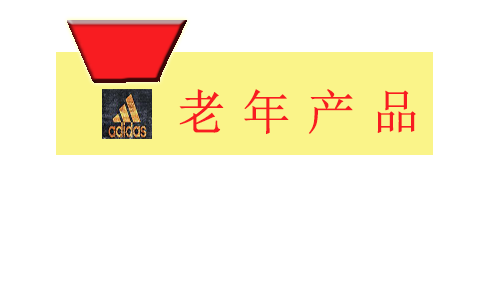
<style>
.page{position:relative;width:500px;height:300px;background:#ffffff}
.page>*{position:absolute;margin:0}
.t1{font:48px "SimSun";letter-spacing:-0.1em;color:#f81c21;font-weight:bold}
</style>
<div class="page">
<p class="t1" style="left:179px;top:89px;width:237px;height:46px">老 年 产 品</p>
</div>
